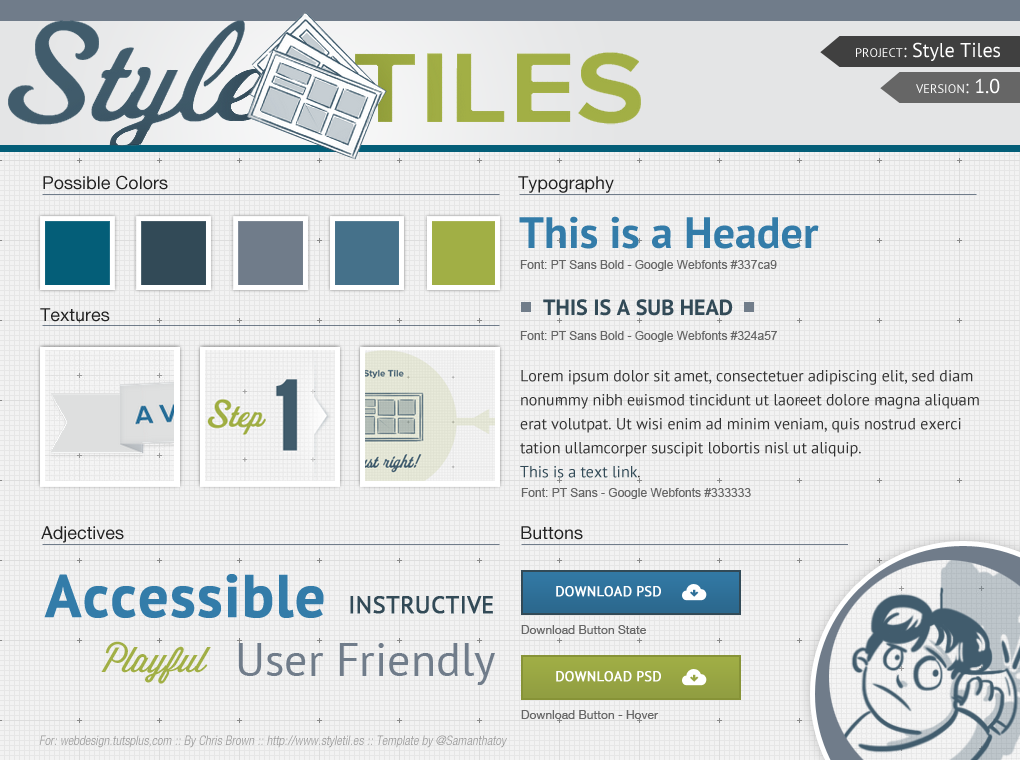
<style>
.page{position:relative;width:1020px;height:760px;background:#f2f2f2}
.page>*{position:absolute;margin:0}
.t1{font:20px "PTSans-Regular";color:#ffffff}
.t2{font:18px "PTSans-Regular";color:#ffffff;font-variant:small-caps}
.t3{font:18px "HelveticaNeueLTCom-Roman";color:#222222}
.t4{font:44px "PTSans-Bold";color:#337ca9}
.t5{font:12px "ArialMT";color:#666666}
.t6{font:22px "PTSans-Bold";color:#324a57;text-transform:uppercase}
.t7{font:16px/24px "PTSans-Regular";color:#333333}
.t8{font:16px/24px "PTSans-Regular";color:#324a57}
.t9{font:60px "PTSans-Bold";color:#337ca9;font-weight:bold}
.t10{font:14px "PTSans-Regular";color:#ffffff;text-transform:uppercase;font-weight:bold}
.t11{font:24px "PTSans-Regular";color:#324a57;text-transform:uppercase;font-weight:bold}
.t12{font:12px "HelveticaNeueLTCom-Roman";color:#666666}
.t13{font:35px "WisdomScriptAI";color:#a1af45}
.t14{font:46px "PTSans-Regular";color:#707c8a}
.t15{font:13px "HelveticaNeueLTCom-LtCn";color:#999999;font-style:italic}
</style>
<div class="page">
<p class="t1" style="left:856px;top:42px;width:144px;height:19px"><span class="t2">project:</span> Style Tiles</p>
<p class="t2" style="left:916px;top:78px;width:84px;height:16px">version:<span class="t1"> 1.0</span></p>
<p class="t3" style="left:43px;top:175px;width:125px;height:15px">Possible Colors</p>
<p class="t3" style="left:518px;top:176px;width:96px;height:17px">Typography</p>
<p class="t4" style="left:519px;top:216px;width:300px;height:33px">This is a Header</p>
<p class="t5" style="left:520px;top:260px;width:257px;height:11px">Font: PT Sans Bold - Google Webfonts #337ca9</p>
<p class="t6" style="left:543px;top:299px;width:190px;height:17px">This is a Sub Head</p>
<p class="t3" style="left:40px;top:308px;width:70px;height:14px">Textures</p>
<p class="t5" style="left:520px;top:331px;width:257px;height:11px">Font: PT Sans Bold - Google Webfonts #324a57</p>
<p class="t7" style="left:520px;top:370px;width:459px;height:108px">Lorem ipsum dolor sit amet, consectetuer adipiscing elit, sed diam nonummy nibh euismod tincidunt ut laoreet dolore magna aliquam erat volutpat. Ut wisi enim ad minim veniam, quis nostrud exerci tation ullamcorper suscipit lobortis nisl ut aliquip.<br><span class="t8">This is a text link</span>.</p>
<p class="t5" style="left:521px;top:488px;width:230px;height:11px">Font: PT Sans - Google Webfonts #333333</p>
<p class="t3" style="left:41px;top:526px;width:83px;height:17px">Adjectives</p>
<p class="t3" style="left:521px;top:526px;width:62px;height:14px">Buttons</p>
<p class="t9" style="left:44px;top:574px;width:280px;height:44px">Accessible</p>
<p class="t10" style="left:556px;top:586px;width:105px;height:11px">Download PSD</p>
<p class="t11" style="left:350px;top:596px;width:143px;height:18px">instructive</p>
<p class="t12" style="left:521px;top:625px;width:125px;height:9px">Download Button State</p>
<p class="t13" style="left:101px;top:641px;width:110px;height:43px">Playful</p>
<p class="t14" style="left:238px;top:643px;width:257px;height:42px">User Friendly</p>
<p class="t10" style="left:556px;top:671px;width:105px;height:11px">Download PSD</p>
<p class="t12" style="left:521px;top:710px;width:138px;height:9px">Download Button - Hover</p>
<p class="t15" style="left:39px;top:735px;width:468px;height:13px">For: webdesign.tutsplus,com :: By Chris Brown :: http://www.styletil.es :: Template by @Samanthatoy</p>
</div>
